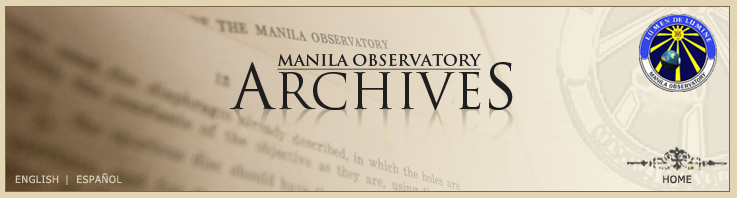
<style>
.page{position:relative;width:737px;height:198px}
.page>*{position:absolute;margin:0}
.t1{font:15.8px "TrajanPro-Bold";color:#1e1e1e;text-decoration:underline}
.t2{font:48.6px "TrajanPro-Regular";color:#1e1e1e}
.t3{font:60.7px "TrajanPro-Regular";color:#1e1e1e}
.t4{font:10px "Tahoma";letter-spacing:0.06em;color:#d4c9b5}
.t5{font:10px "Tahoma";letter-spacing:0.06em;color:#cec4b0}
.t6{font:10px "Tahoma";letter-spacing:0.06em}
.t7{font:10px "Tahoma";letter-spacing:0.06em;color:#363531}
</style>
<div class="page">
<p class="t1" style="left:277px;top:54px;width:205px;height:16px">MANILA OBSERVATORY</p>
<p class="t2" style="left:229px;top:62px;width:284px;height:48px"><span class="t3">A</span>RCHIVE<span class="t3">S</span></p>
<p class="t4" style="left:77px;top:173px;width:45px;height:11px">ESPAÑOL</p>
<p class="t5" style="left:15px;top:175px;width:44px;height:9px">ENGLISH</p>
<p class="t6" style="left:66px;top:175px;width:2px;height:10px">|</p>
<p class="t7" style="left:663px;top:175px;width:29px;height:9px">HOME</p>
</div>
